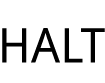
<style>
.page{position:relative;width:105px;height:83px;background:#ffffff}
.page>*{position:absolute;margin:0}
.t1{font:47.9px "DroidSans";color:#000000}
</style>
<div class="page">
<p class="t1" style="left:2px;top:28px;width:103px;height:35px">HALT</p>
</div>
